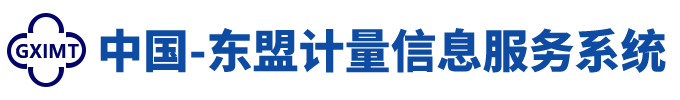
<style>
.page{position:relative;width:680px;height:100px;background:#ffffff}
.page>*{position:absolute;margin:0}
.t1{font:46px "SourceHanSansCN-Heavy";color:#0e4ca4}
.t2{font:18px "MicrosoftYaHei-Bold";color:#020468}
</style>
<div class="page">
<p class="t1" style="left:100px;top:28px;width:566px;height:45px">中国-东盟计量信息服务系统</p>
<p class="t2" style="left:16px;top:44px;width:63px;height:14px">GXIMT</p>
</div>
